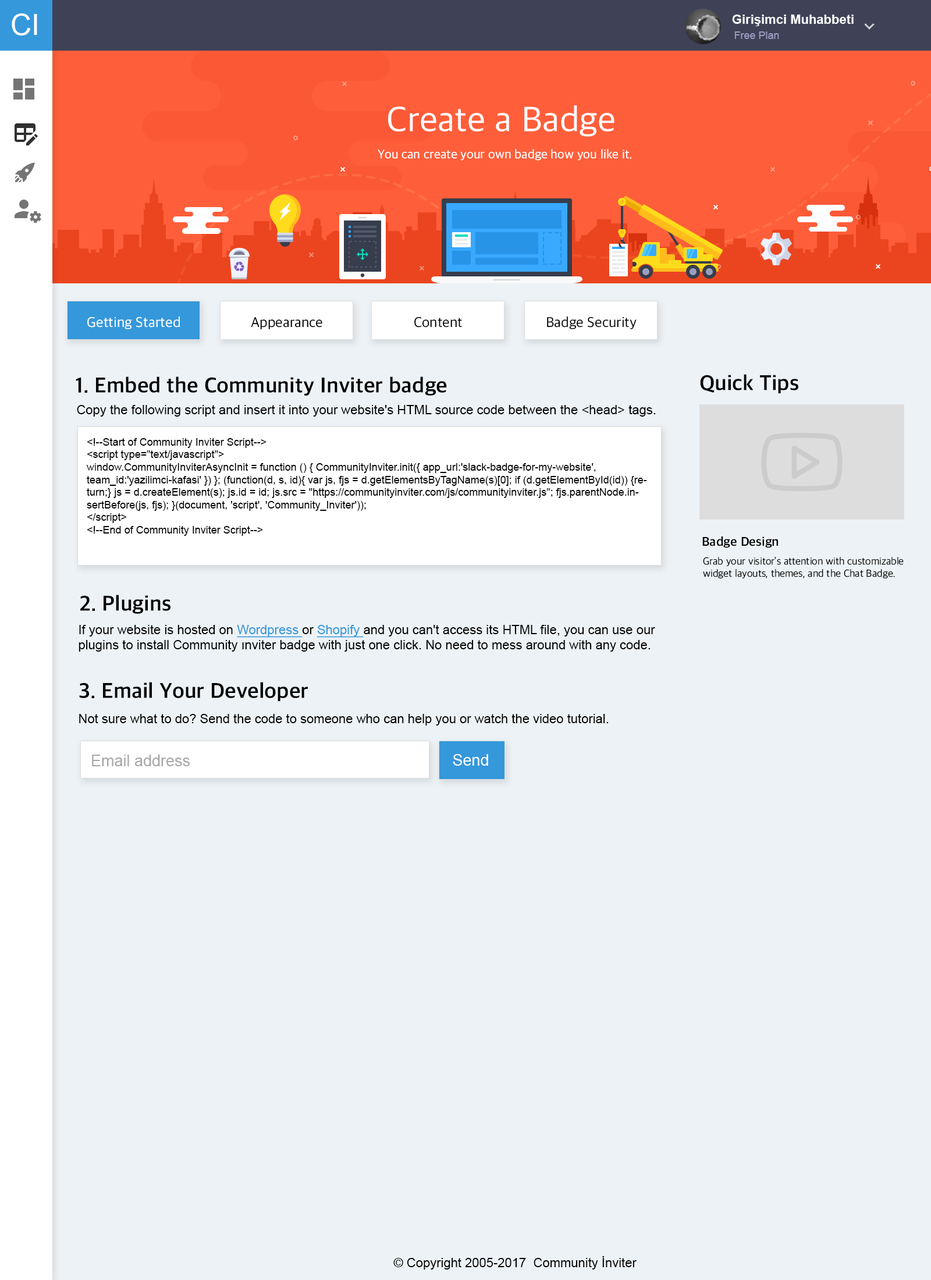
<style>
.page{position:relative;width:931px;height:1280px;background:#edf2f6}
.page>*{position:absolute;margin:0}
.t1{font:29.1px "ArialMT";color:#ffffff}
.t2{font:12.8px "Arial-BoldMT";color:#ffffff}
.t3{font:10.5px "ArialMT";color:#9a9fbf}
.t4{font:36.1px "AppleSDGothicNeo-Regular";color:#ffffff}
.t5{font:12.8px "AppleSDGothicNeo-Regular";color:#ffffff}
.t6{font:14.6px "AppleSDGothicNeo-Regular";color:#ffffff}
.t7{font:14.6px "AppleSDGothicNeo-Regular";color:#000000}
.t8{font:21.5px "AppleSDGothicNeo-Bold";color:#000000}
.t9{font:12.8px "ArialMT";color:#000000}
.t10{font:10.5px "ArialMT";color:#000000}
.t11{font:12.8px "AppleSDGothicNeo-Bold";color:#000000}
.t12{font:10.5px "AppleSDGothicNeo-Light";color:#000000}
.t13{font:12.8px "ArialMT";color:#3498db;text-decoration:underline}
.t14{font:15.7px "ArialMT";color:#a6a6a6}
.t15{font:15.7px "ArialMT";color:#ffffff}
</style>
<div class="page">
<p class="t1" style="left:12px;top:13px;width:25px;height:23px">CI</p>
<p class="t2" style="left:732px;top:15px;width:122px;height:11px">Girişimci Muhabbeti</p>
<p class="t3" style="left:735px;top:31px;width:44px;height:8px">Free Plan</p>
<p class="t4" style="left:388px;top:105px;width:227px;height:32px">Create a Badge</p>
<p class="t5" style="left:378px;top:149px;width:254px;height:12px">You can create your own badge how you like it.</p>
<p class="t6" style="left:87px;top:317px;width:93px;height:12px">Getting Started</p>
<p class="t7" style="left:251px;top:317px;width:71px;height:12px">Appearance</p>
<p class="t7" style="left:414px;top:317px;width:48px;height:11px">Content</p>
<p class="t7" style="left:547px;top:317px;width:90px;height:12px">Badge Security</p>
<p class="t8" style="left:76px;top:377px;width:371px;height:19px">1. Embed the Community Inviter badge</p>
<p class="t8" style="left:700px;top:374px;width:99px;height:19px">Quick Tips</p>
<p class="t9" style="left:77px;top:405px;width:579px;height:12px">Copy the following script and insert it into your website's HTML source code between the &lt;head&gt; tags.</p>
<p class="t10" style="left:86px;top:438px;width:561px;height:98px">&lt;!--Start of Community Inviter Script--&gt;<br>&lt;script type="text/javascript"&gt;<br>window.CommunityInviterAsyncInit = function () { CommunityInviter.init({ app_url:'slack-badge-for-my-website', team_id:'yazilimci-kafasi' }) }; (function(d, s, id){ var js, fjs = d.getElementsByTagName(s)[0]; if (d.getElementById(id)) {return;} js = d.createElement(s); js.id = id; js.src = "https://communityinviter.com/js/communityinviter.js"; fjs.parentNode.insertBefore(js, fjs); }(document, 'script', 'Community_Inviter'));<br>&lt;/script&gt;<br>&lt;!--End of Community Inviter Script--&gt;</p>
<p class="t11" style="left:703px;top:537px;width:75px;height:11px">Badge Design</p>
<p class="t12" style="left:703px;top:557px;width:201px;height:22px">Grab your visitor’s attention with customizable widget layouts, themes, and the Chat Badge.</p>
<p class="t8" style="left:80px;top:595px;width:91px;height:19px">2. Plugins</p>
<p class="t9" style="left:79px;top:625px;width:576px;height:27px">If your website is hosted on <span class="t13">Wordpress </span>or <span class="t13">Shopify </span>and you can't access its HTML file, you can use our plugins to install Community ınviter badge with just one click. No need to mess around with any code.</p>
<p class="t8" style="left:79px;top:682px;width:229px;height:19px">3. Email Your Developer</p>
<p class="t9" style="left:79px;top:714px;width:530px;height:12px">Not sure what to do? Send the code to someone who can help you or watch the video tutorial.</p>
<p class="t14" style="left:92px;top:755px;width:98px;height:12px">Email address</p>
<p class="t15" style="left:453px;top:754px;width:35px;height:12px">Send</p>
<p class="t9" style="left:393px;top:1257px;width:244px;height:13px">© Copyright 2005-2017  Community İnviter</p>
</div>
